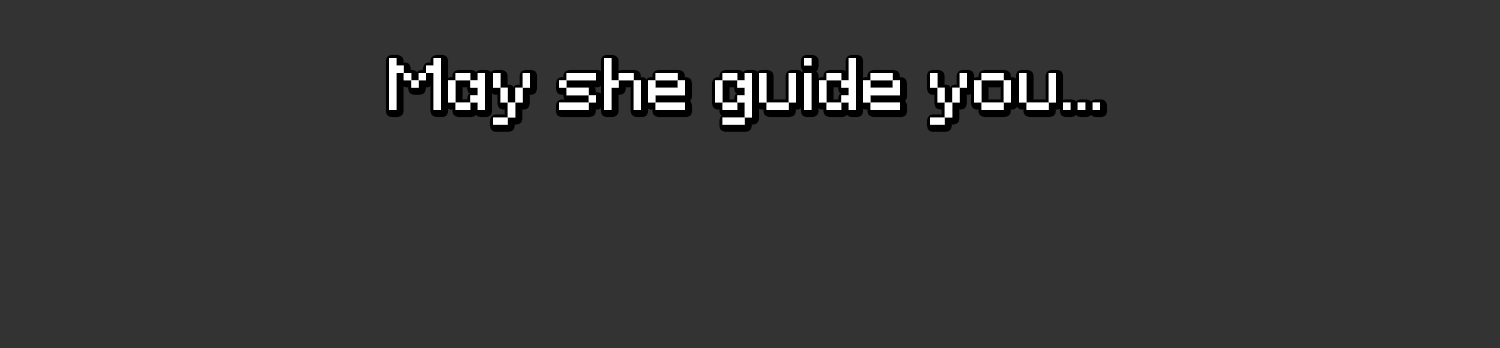
<style>
.page{position:relative;width:1500px;height:348px;background:#333333}
.page>*{position:absolute;margin:0}
.t1{font:66.7px "PixeloidSans";color:#ffffff}
</style>
<div class="page">
<p class="t1" style="left:389px;top:58px;width:711px;height:67px">May she guide you…</p>
</div>
